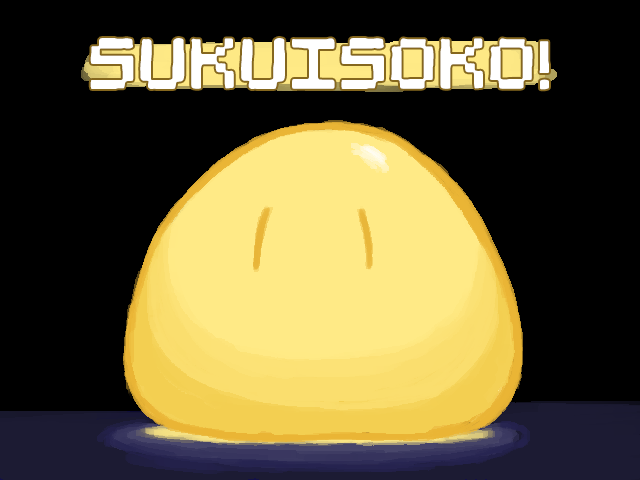
<style>
.page{position:relative;width:640px;height:480px;background:#000000}
.page>*{position:absolute;margin:0}
.t1{font:72px "KCPixelHandRegular";color:#ffffff}
</style>
<div class="page">
<p class="t1" style="left:90px;top:38px;width:459px;height:52px">sukuisoko!</p>
</div>
